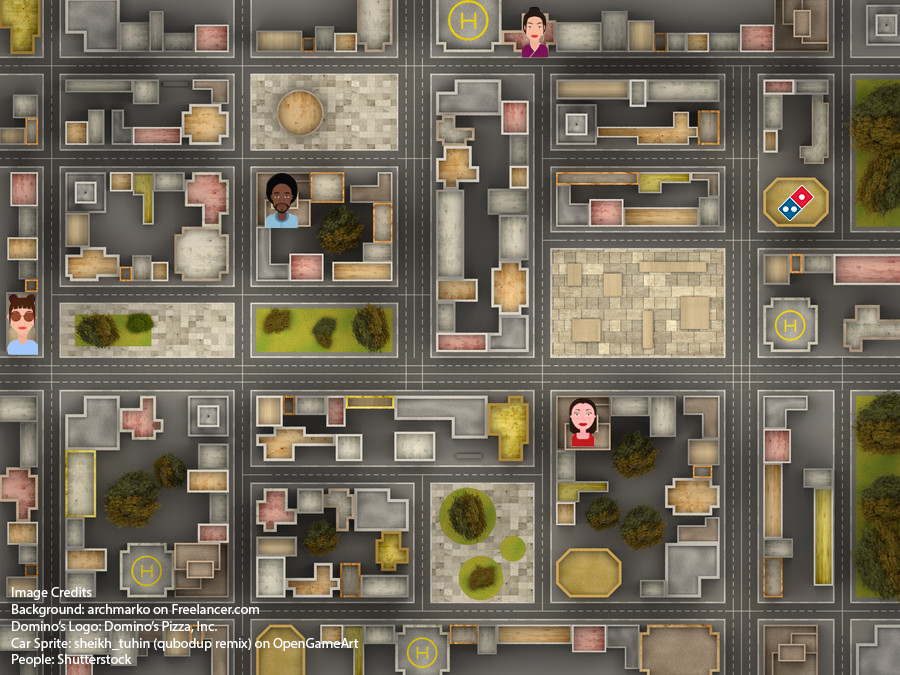
<style>
.page{position:relative;width:900px;height:675px}
.page>*{position:absolute;margin:0}
.t1{font:14px "MyriadPro-Regular";color:#ffffff}
</style>
<div class="page">
<p class="t1" style="left:11px;top:587px;width:348px;height:80px">Image Credits<br>Background: archmarko on Freelancer.com<br>Domino’s Logo: Domino’s Pizza, Inc.<br>Car Sprite: sheikh_tuhin (qubodup remix) on OpenGameArt<br>People: Shutterstock</p>
</div>
